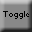
<style>
.page{position:relative;width:32px;height:32px;background:#888888}
.page>*{position:absolute;margin:0}
.t1{font:8px "Small Fonts";color:#000000}
</style>
<div class="page">
<p class="t1" style="left:3px;top:11px;width:26px;height:8px">Toggle</p>
</div>
